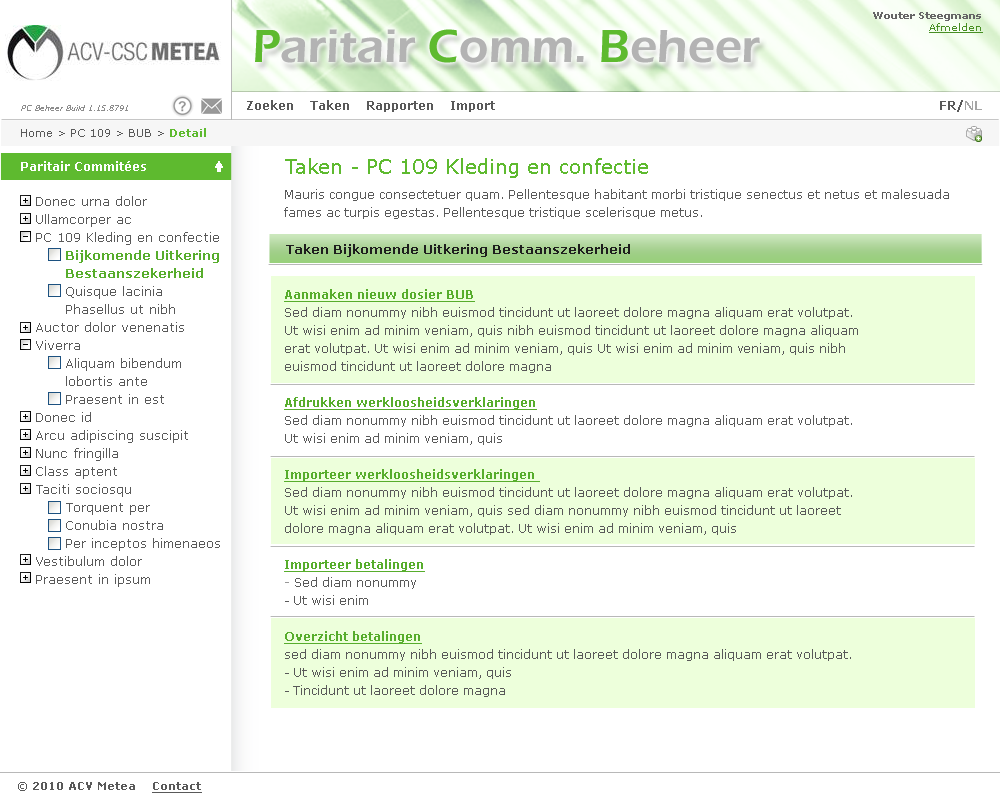
<style>
.page{position:relative;width:1000px;height:800px;background:#ffffff}
.page>*{position:absolute;margin:0}
.t1{font:10px "Verdana-Bold";color:#666666}
.t2{font:10px "Verdana";color:#488f24;text-decoration:underline}
.t3{font:48px "ErasITC-Demi";color:#b3b3b3}
.t4{font:48px "ErasITC-Demi";color:#5eba2f}
.t5{font:12px "Verdana-Bold";color:#595959}
.t6{font:12px "Verdana-Bold";color:#a4a4a4}
.t7{font:8px "Verdana-Italic";color:#8c8c8c}
.t8{font:11px "Verdana";color:#595959}
.t9{font:11px "Verdana-Bold";color:#5eba2f}
.t10{font:12px "Verdana-Bold";color:#ffffff}
.t11{font:20px "Verdana";color:#5eba2f}
.t12{font:13px/18px "Verdana";color:#595959}
.t13{font:13px/18px "Verdana-Bold";color:#57ad2c}
.t14{font:12px/18px "Verdana";color:#595959}
.t15{font:13px "Verdana-Bold";color:#1e1e1e}
.t16{font:12px/18px "Verdana-Bold";color:#57ad2c;text-decoration:underline}
.t17{font:12px/18px "Verdana-Bold";color:#989898}
.t18{font:11px "Verdana-Bold";color:#595959}
.t19{font:11px "Verdana-Bold";color:#595959;text-decoration:underline}
</style>
<div class="page">
<p class="t1" style="left:873px;top:12px;width:110px;height:21px;text-align:right">Wouter Steegmans<br><span class="t2">Afmelden</span></p>
<p class="t3" style="left:255px;top:29px;width:505px;height:34px"><span class="t4">P</span>aritair <span class="t4">C</span>omm. <span class="t4">B</span>eheer</p>
<p class="t5" style="left:247px;top:100px;width:248px;height:12px">Zoeken    Taken    Rapporten    Import</p>
<p class="t5" style="left:940px;top:100px;width:42px;height:12px">FR/<span class="t6">NL</span></p>
<p class="t7" style="left:21px;top:105px;width:107px;height:6px">PC Beheer Build 1.15.8791</p>
<p class="t8" style="left:21px;top:128px;width:185px;height:9px">Home &gt; PC 109 &gt; BUB &gt; <span class="t9">Detail</span></p>
<p class="t10" style="left:21px;top:161px;width:125px;height:10px">Paritair Commitées</p>
<p class="t11" style="left:285px;top:158px;width:363px;height:20px">Taken - PC 109 Kleding en confectie</p>
<p class="t12" style="left:36px;top:196px;width:184px;height:391px">Donec urna dolor<br>Ullamcorper ac<br>PC 109 Kleding en confectie<br>      <span class="t13">Bijkomende Uitkering<br>      Bestaanszekerheid<br></span>      Quisque lacinia<br>      Phasellus ut nibh <br>Auctor dolor venenatis <br>Viverra<br>      Aliquam bibendum <br>      lobortis ante<br>      Praesent in est<br>Donec id <br>Arcu adipiscing suscipit<br>Nunc fringilla<br>Class aptent <br>Taciti sociosqu <br>      Torquent per <br>      Conubia nostra<br>      Per inceptos himenaeos<br>Vestibulum dolor<br>Praesent in ipsum</p>
<p class="t14" style="left:284px;top:189px;width:665px;height:30px">Mauris congue consectetuer quam. Pellentesque habitant morbi tristique senectus et netus et malesuada <br>fames ac turpis egestas. Pellentesque tristique scelerisque metus.</p>
<p class="t15" style="left:286px;top:244px;width:344px;height:13px">Taken Bijkomende Uitkering Bestaanszekerheid</p>
<p class="t14" style="left:284px;top:289px;width:574px;height:408px"><span class="t16">Aanmaken nieuw dosier BUB<br></span>Sed diam nonummy nibh euismod tincidunt ut laoreet dolore magna aliquam erat volutpat. <br>Ut wisi enim ad minim veniam, quis nibh euismod tincidunt ut laoreet dolore magna aliquam <br>erat volutpat. Ut wisi enim ad minim veniam, quis Ut wisi enim ad minim veniam, quis nibh <br>euismod tincidunt ut laoreet dolore magna<br><br><span class="t16">Afdrukken werkloosheidsverklaringen<br></span>Sed diam nonummy nibh euismod tincidunt ut laoreet dolore magna aliquam erat volutpat. <br>Ut wisi enim ad minim veniam, quis <br><br><span class="t16">Importeer werkloosheidsverklaringen <br></span>Sed diam nonummy nibh euismod tincidunt ut laoreet dolore magna aliquam erat volutpat.<br>Ut wisi enim ad minim veniam, quis sed diam nonummy nibh euismod tincidunt ut laoreet <br>dolore magna aliquam erat volutpat. Ut wisi enim ad minim veniam, quis <br><br><span class="t16">Importeer betalingen<br></span><span class="t17">- </span>Sed diam nonummy <br>- Ut wisi enim <br><br><span class="t16">Overzicht betalingen<br></span>sed diam nonummy nibh euismod tincidunt ut laoreet dolore magna aliquam erat volutpat. <br>- Ut wisi enim ad minim veniam, quis <br>- Tincidunt ut laoreet dolore magna</p>
<p class="t18" style="left:18px;top:782px;width:184px;height:11px"><span class="t8">©</span> 2010 ACV Metea    <span class="t19">Contact</span></p>
</div>
